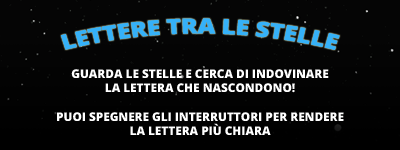
<style>
.page{position:relative;width:400px;height:150px;background:#050505}
.page>*{position:absolute;margin:0}
.t1{font:21px "OpenSans-Extrabold";color:#35b1f8;scale:1.12 1}
.t2{font:12px "OpenSans-Extrabold";color:#ffffff}
</style>
<div class="page">
<p class="t1" style="left:60px;top:18px;width:280px;height:32px">LETTERE TRA LE STELLE</p>
<p class="t2" style="left:57px;top:69px;width:287px;height:66px;text-align:center">GUARDA LE STELLE E CERCA DI INDOVINARE<br>LA LETTERA CHE NASCONDONO!<br><br>PUOI SPEGNERE GLI INTERRUTTORI PER RENDERE<br>LA LETTERA PIÙ CHIARA</p>
</div>
